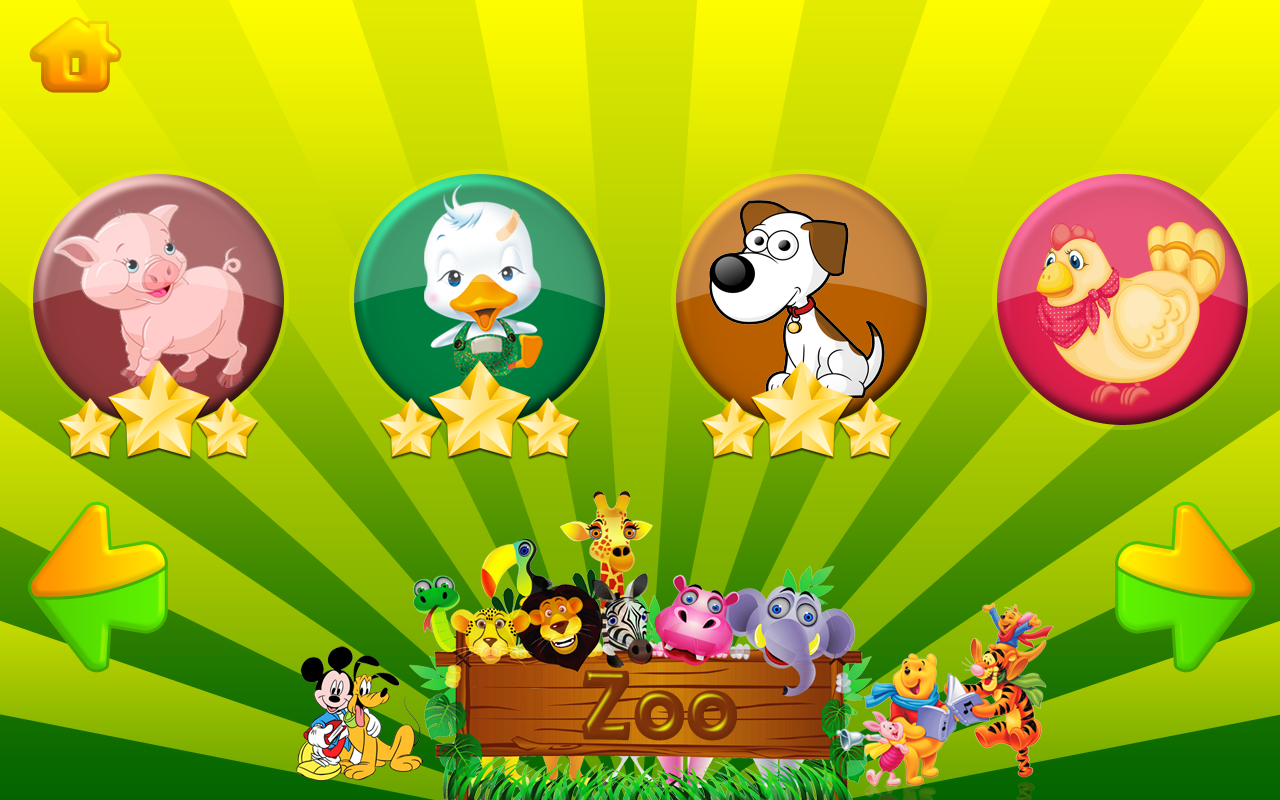
<style>
.page{position:relative;width:1280px;height:800px}
.page>*{position:absolute;margin:0}
.t1{font:100px "BerlinSansFBDemi-Bold";color:#80330a}
</style>
<div class="page">
<p class="t1" style="left:582px;top:670px;width:155px;height:71px">Zoo</p>
</div>
